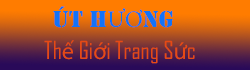
<style>
.page{position:relative;width:250px;height:70px}
.page>*{position:absolute;margin:0}
.t1{font:24px "Stencil";color:#1273f8}
.t2{font:24px "MinionPro-Regular";color:#1273f8}
.t3{font:24px "AgencyFB-Reg";color:#e64a14}
.t4{font:24px "MyriadPro-Regular";color:#e64a14}
</style>
<div class="page">
<p class="t1" style="left:53px;top:6px;width:120px;height:22px">ÚT H<span class="t2">ƯƠ</span>NG</p>
<p class="t3" style="left:44px;top:40px;width:151px;height:24px">Th<span class="t4">ế</span> Gi<span class="t4">ớ</span>i Trang S<span class="t4">ứ</span>c</p>
</div>
